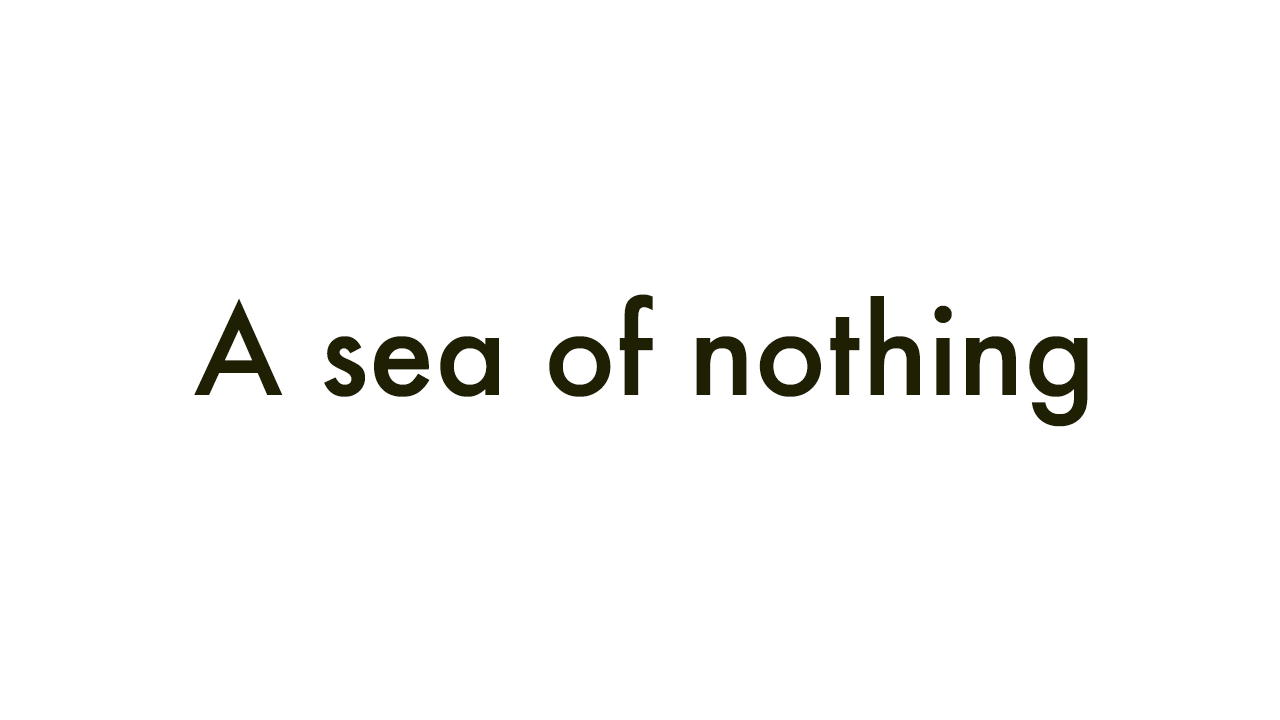
<style>
.page{position:relative;width:1280px;height:720px;background:#ffffff}
.page>*{position:absolute;margin:0}
.t1{font:120px "Futura-Medium";color:#1f1f03}
</style>
<div class="page">
<p class="t1" style="left:194px;top:294px;width:894px;height:133px">A sea of nothing</p>
</div>
